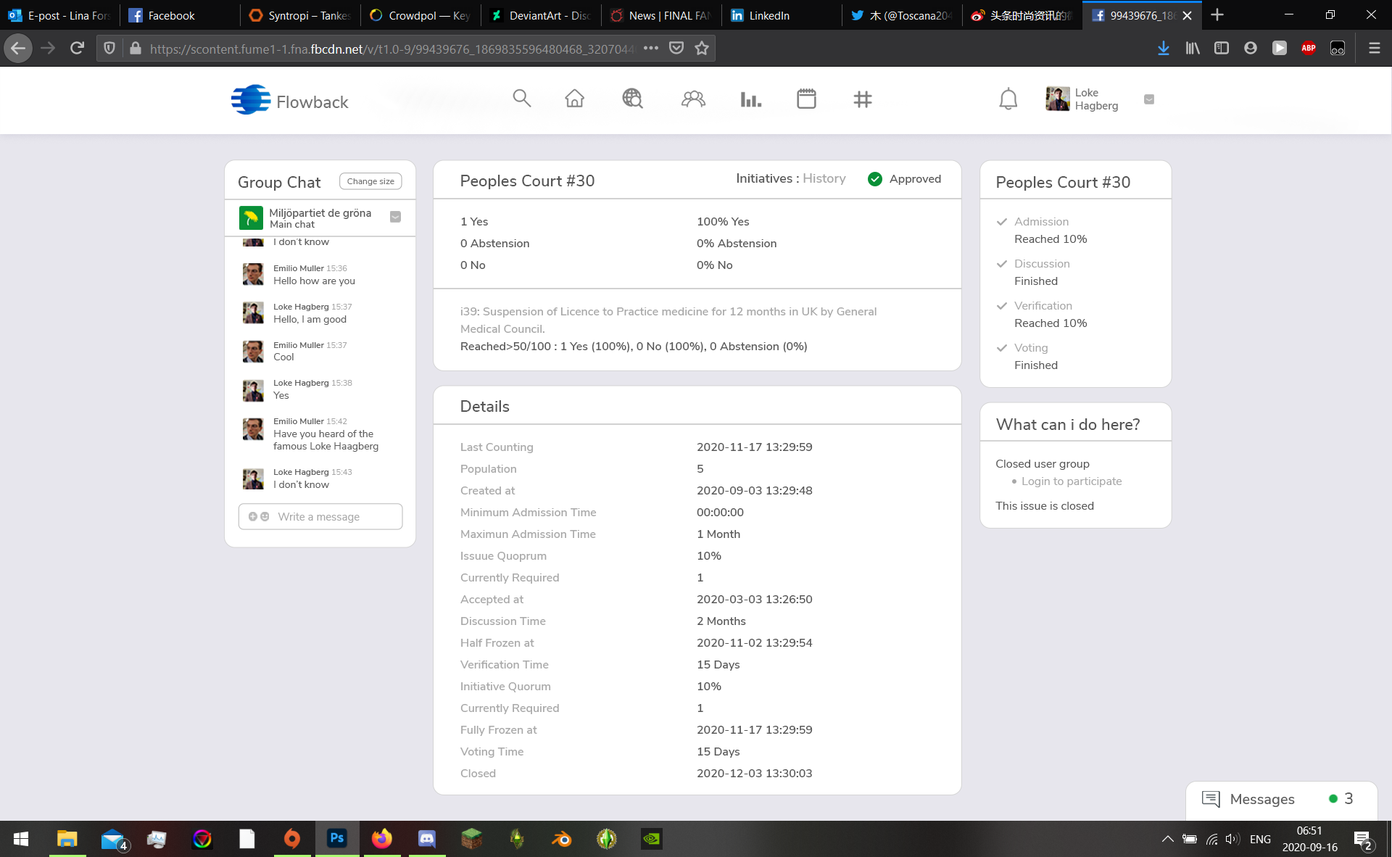
<style>
.page{position:relative;width:1392px;height:857px;background:#ffffff}
.page>*{position:absolute;margin:0}
.t1{font:10.9px "NunitoSans-SemiBold";color:#747474}
.t2{font:10.9px/21.9px "NunitoSans-SemiBold";color:#747474}
.t3{font:16.7px "NunitoSans-SemiBold";color:#747474}
.t4{font:13px "NunitoSans-SemiBold";color:#575757}
.t5{font:13px "NunitoSans-SemiBold";color:#a8a8a8}
.t6{font:15.9px "NunitoSans-SemiBold";color:#575757}
.t7{font:8.7px "NunitoSans-Regular";color:#727272}
.t8{font:11.6px "NunitoSans-SemiBold";color:#575757}
.t9{font:10.9px/17.3px "NunitoSans-SemiBold";color:#575757}
.t10{font:13px/17.3px "NunitoSans-Regular";color:#ececec}
.t11{font:10.1px "NunitoSans-SemiBold";color:#575757}
.t12{font:11.6px/21.7px "NunitoSans-SemiBold";color:#575757}
.t13{font:11.6px/24.6px "NunitoSans-Regular";color:#a8a8a8}
.t14{font:11.6px/41.8px "NunitoSans-Regular";color:#a8a8a8}
.t15{font:11.6px/17.4px "NunitoSans-Regular";color:#575757}
.t16{font:10.1px/13px "NunitoSans-Regular";color:#5e5e5e}
.t17{font:8.7px/12.7px "NunitoSans-SemiBold";color:#5e5e5e}
.t18{font:8px/12.7px "NunitoSans-Regular";color:#a8a8a8}
.t19{font:10.1px/12.7px "NunitoSans-Regular";color:#5e5e5e}
.t20{font:11.6px/17.4px "NunitoSans-SemiBold";color:#a8a8a8}
.t21{font:11.6px/17.4px "NunitoSans-SemiBold";color:#575757}
.t22{font:11.6px/21.7px "NunitoSans-SemiBold";color:#a8a8a8}
.t23{font:11.6px/17.4px "NunitoSans-Regular";color:#a8a8a8}
.t24{font:11.6px/24.6px "NunitoSans-Regular";color:#575757}
.t25{font:10.9px "NunitoSans-Regular";color:#aaaaaa}
.t26{font:8.1px "NunitoSans-Regular";color:#aaaaaa}
.t27{font:14.5px "NunitoSans-SemiBold";color:#5e5e5e}
.t28{font:15.9px "NunitoSans-SemiBold";color:#5e5e5e}
</style>
<div class="page">
<p class="t1" style="left:1076px;top:88px;width:42px;height:24px"><span class="t2">Loke<br></span>Hagberg</p>
<p class="t3" style="left:278px;top:96px;width:71px;height:12px">Flowback</p>
<p class="t4" style="left:736px;top:173px;width:110px;height:12px">Initiatives : <span class="t5">History</span></p>
<p class="t6" style="left:238px;top:176px;width:83px;height:15px">Group Chat</p>
<p class="t7" style="left:347px;top:178px;width:47px;height:8px">Change size</p>
<p class="t6" style="left:461px;top:175px;width:133px;height:14px">Peoples Court #30</p>
<p class="t8" style="left:889px;top:175px;width:52px;height:10px">Approved</p>
<p class="t6" style="left:997px;top:176px;width:133px;height:15px">Peoples Court #30</p>
<p class="t9" style="left:270px;top:209px;width:101px;height:19px"><span class="t10">           </span>Miljöpartiet de gröna<br>    <span class="t11">Main chat</span></p>
<p class="t12" style="left:460px;top:217px;width:69px;height:52px">1 Yes<br>0 Abstension<br>0 No</p>
<p class="t12" style="left:697px;top:217px;width:79px;height:53px">100% Yes<br>0% Abstension<br>0% No</p>
<p class="t13" style="left:1014px;top:217px;width:73px;height:152px"><span class="t14">Admission<br></span><span class="t15">Reached 10%<br></span>Discussion<br><span class="t15">Finished<br></span>Verification<br><span class="t15">Reached 10%<br></span>Voting<br><span class="t15">Finished</span></p>
<p class="t16" style="left:273px;top:265px;width:105px;height:223px"><span class="t17">Emilio Muller </span><span class="t18">15:36<br></span><span class="t19">Hello how are you<br><br></span><span class="t17">Loke Hagberg </span><span class="t18">15:37<br></span>Hello, I am good<br><br><span class="t17">Emilio Muller </span><span class="t18">15:37<br></span><span class="t19">Cool<br><br></span><span class="t17">Loke Hagberg </span><span class="t18">15:38<br></span><span class="t19">Yes<br><br></span><span class="t17">Emilio Muller </span><span class="t18">15:42<br></span>Have you heard of the <br><span class="t19">famous Loke Haagberg<br><br></span><span class="t17">Loke Hagberg </span><span class="t18">15:43<br></span><span class="t19">I don’t know</span></p>
<p class="t20" style="left:460px;top:307px;width:416px;height:45px">i39: Suspension of Licence to Practice medicine for 12 months in UK by General<br>Medical Council.<br><span class="t21">Reached&gt;50/100 : 1 Yes (100%), 0 No (100%), 0 Abstension (0%)</span></p>
<p class="t6" style="left:461px;top:400px;width:49px;height:12px">Details</p>
<p class="t6" style="left:996px;top:418px;width:143px;height:12px">What can i do here?</p>
<p class="t22" style="left:460px;top:443px;width:137px;height:334px">Last Counting<br>Population<br>Created at<br>Minimum Admission Time<br>Maximun Admission Time<br>Issuue Quoprum<br>Currently Required<br>Accepted at<br>Discussion Time<br>Half Frozen at<br>Verification Time<br>Initiative Quorum<br>Currently Required<br>Fully Frozen at<br>Voting Time<br>Closed</p>
<p class="t12" style="left:697px;top:443px;width:116px;height:334px">2020-11-17 13:29:59<br>5<br>2020-09-03 13:29:48<br>00:00:00<br>1 Month<br>10%<br>1<br>2020-03-03 13:26:50<br>2 Months<br>2020-11-02 13:29:54<br>15 Days<br>10%<br>1<br>2020-11-17 13:29:59<br>15 Days<br>2020-12-03 13:30:03</p>
<p class="t23" style="left:995px;top:460px;width:127px;height:50px"><span class="t15">Closed user group<br> </span>Login to participate<br><span class="t24">This issue is closed</span></p>
<p class="t25" style="left:278px;top:512px;width:82px;height:11px"><span class="t26">     </span>Write a message</p>
<p class="t27" style="left:1231px;top:792px;width:122px;height:15px"><span class="t28"> </span>Messages <span class="t28">   3</span></p>
</div>
